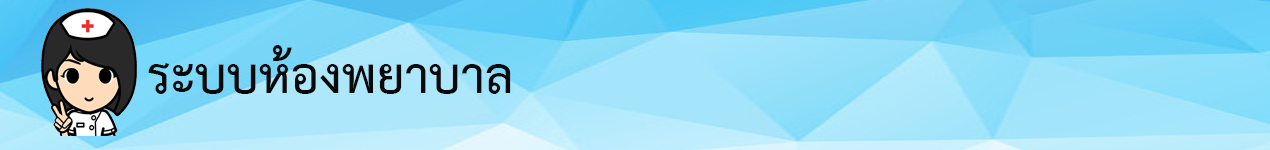
<style>
.page{position:relative;width:1270px;height:150px}
.page>*{position:absolute;margin:0}
.t1{font:72px "THSarabunPSK-Bold";color:#090909}
</style>
<div class="page">
<p class="t1" style="left:148px;top:45px;width:363px;height:49px">ระบบห้องพยาบาล</p>
</div>
